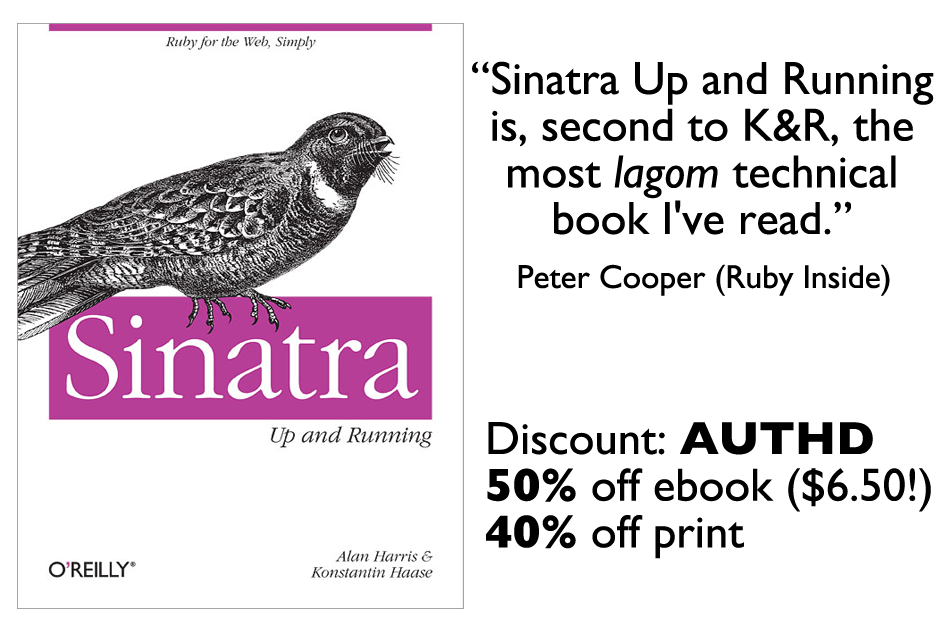
<style>
.page{position:relative;width:950px;height:633px;background:#ffffff}
.page>*{position:absolute;margin:0}
.t1{font:46.7px/46.7px "GillSans";color:#000000}
.t2{font:46.7px/46.7px "GillSans-Italic";color:#000000}
.t3{font:33.3px "GillSans";color:#000000}
.t4{font:46.7px/46.7px "GillSans-Bold";color:#000000}
</style>
<div class="page">
<p class="t1" style="left:472px;top:61px;width:462px;height:174px;text-align:center">“Sinatra Up and Running<br>is, second to K&amp;R, the<br>most <span class="t2">lagom</span> technical<br>book I've read.”</p>
<p class="t3" style="left:518px;top:264px;width:372px;height:32px">Peter Cooper (Ruby Inside)</p>
<p class="t1" style="left:486px;top:422px;width:445px;height:137px">Discount: <span class="t4">AUTHD<br>50%</span> off ebook ($6.50!)<br><span class="t4">40%</span> off print</p>
</div>
